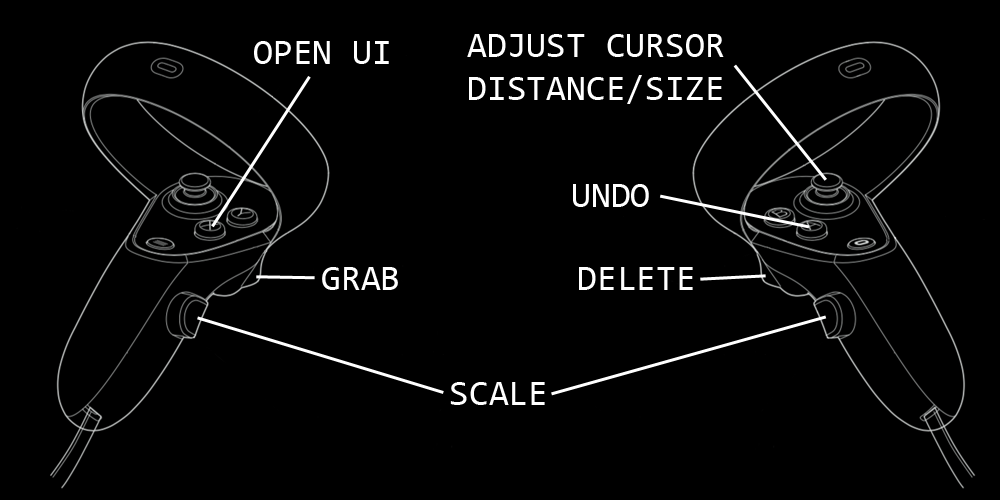
<style>
.page{position:relative;width:1000px;height:500px;background:#000000}
.page>*{position:absolute;margin:0}
.t1{font:36px "Consolas";color:#ffffff}
</style>
<div class="page">
<p class="t1" style="left:254px;top:41px;width:135px;height:23px">OPEN UI</p>
<p class="t1" style="left:467px;top:34px;width:257px;height:70px">ADJUST CURSOR<br>DISTANCE/SIZE</p>
<p class="t1" style="left:573px;top:184px;width:76px;height:23px">UNDO</p>
<p class="t1" style="left:322px;top:267px;width:76px;height:23px">GRAB</p>
<p class="t1" style="left:579px;top:267px;width:114px;height:23px">DELETE</p>
<p class="t1" style="left:450px;top:382px;width:95px;height:23px">SCALE</p>
</div>
